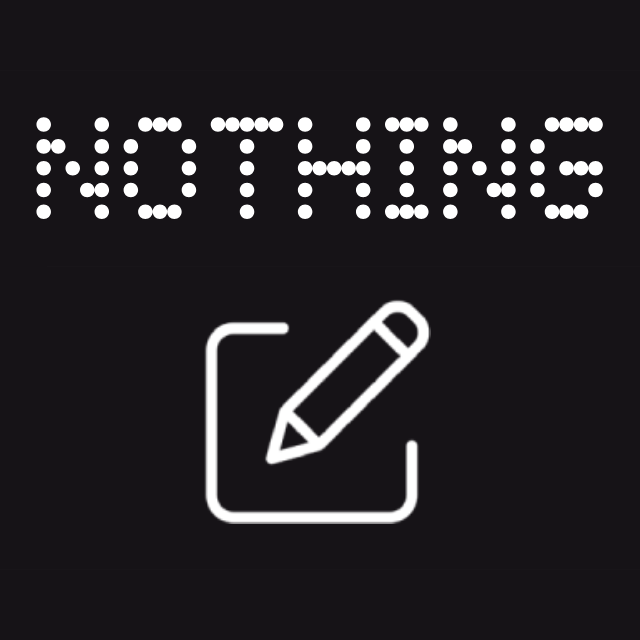
<style>
.page{position:relative;width:640px;height:640px;background:#161317}
.page>*{position:absolute;margin:0}
.t1{font:145.2px "Ndot-55";color:#ffffff}
</style>
<div class="page">
<p class="t1" style="left:36px;top:117px;width:567px;height:102px">NOTHING</p>
</div>
